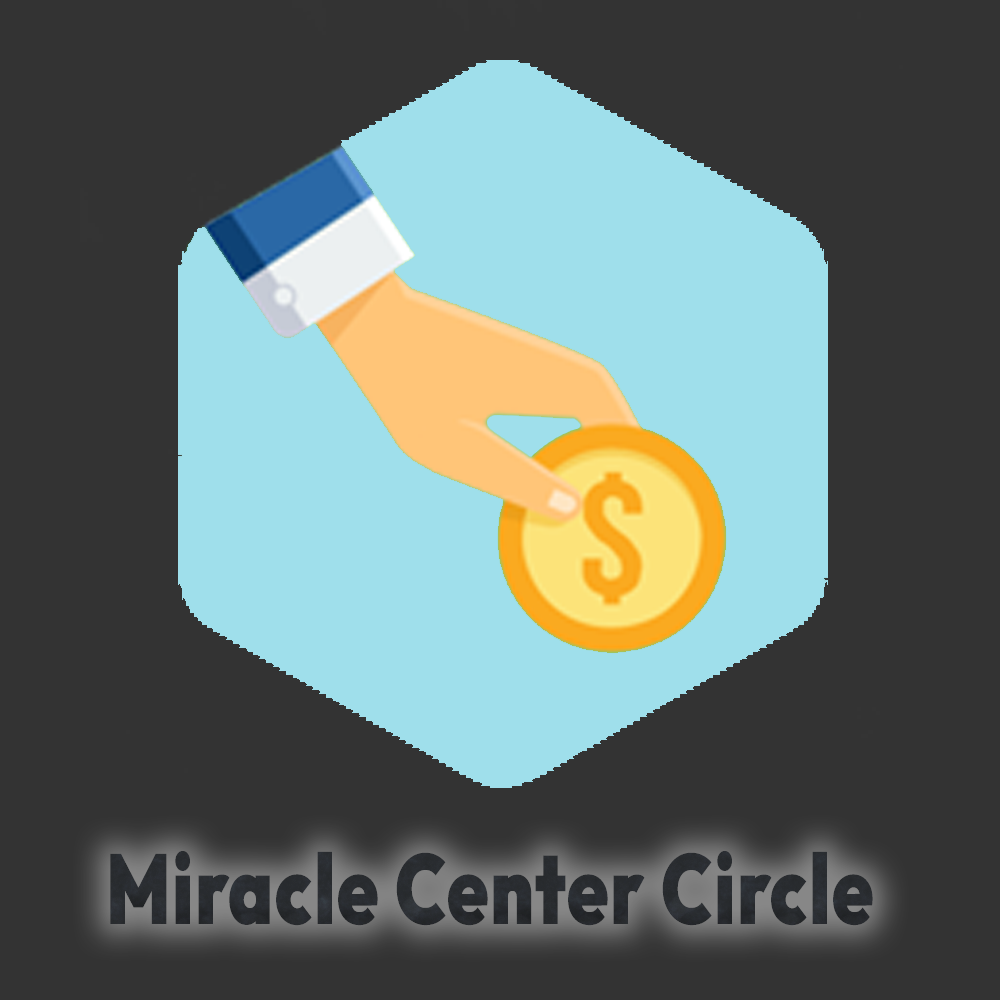
<style>
.page{position:relative;width:1000px;height:1000px;background:#333333}
.page>*{position:absolute;margin:0}
.t1{font:98.5px "Outfit-Black";letter-spacing:0.02em;color:#292c30;scale:0.75 1}
</style>
<div class="page">
<p class="t1" style="left:110px;top:851px;width:763px;height:75px">Miracle Center Circle</p>
</div>
